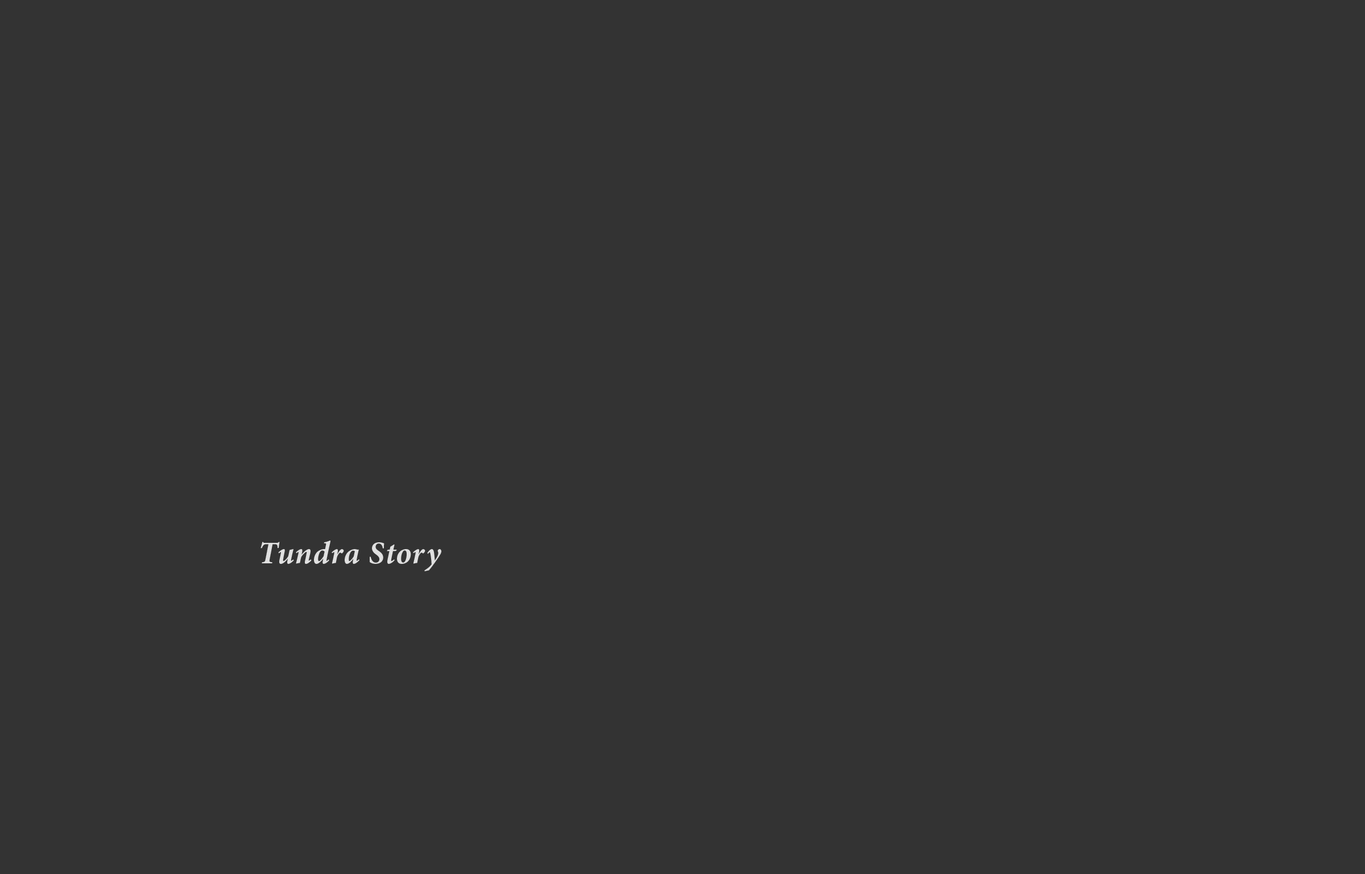
<style>
.page{position:relative;width:1365px;height:874px;background:#333333}
.page>*{position:absolute;margin:0}
.t1{font:31.7px "MinionPro-BoldIt";letter-spacing:0.025em;color:#e0e0e0}
</style>
<div class="page">
<p class="t1" style="left:260px;top:540px;width:181px;height:31px">Tundra Story</p>
</div>
